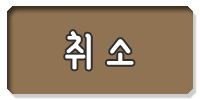
<style>
.page{position:relative;width:200px;height:100px;background:#907353}
.page>*{position:absolute;margin:0}
.t1{font:48.9px "YanoljaYacheR";color:#ffffff}
</style>
<div class="page">
<p class="t1" style="left:65px;top:31px;width:69px;height:39px">취 소</p>
</div>
